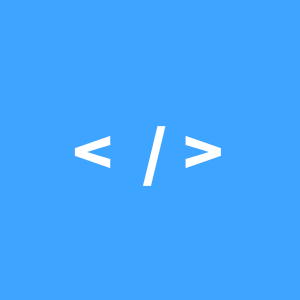
<style>
.page{position:relative;width:300px;height:300px;background:#3da5ff}
.page>*{position:absolute;margin:0}
.t1{font:60px "SourceHanSansCNVF-Heavy";color:#ffffff;scale:1.1 1}
</style>
<div class="page">
<p class="t1" style="left:74px;top:126px;width:147px;height:60px">&lt;  / &gt;</p>
</div>
